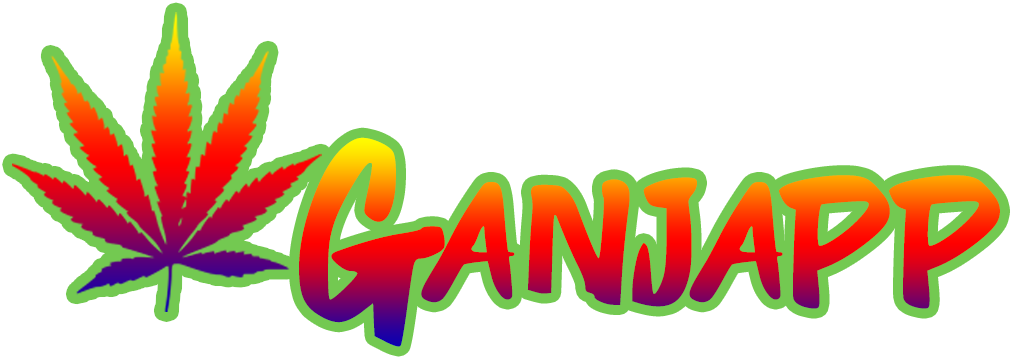
<style>
.page{position:relative;width:1011px;height:359px;background:#ffffff}
.page>*{position:absolute;margin:0}
.t1{font:300px "LingLengLang"}
</style>
<div class="page">
<p class="t1" style="left:299px;top:137px;width:701px;height:210px">Ganjapp</p>
</div>
